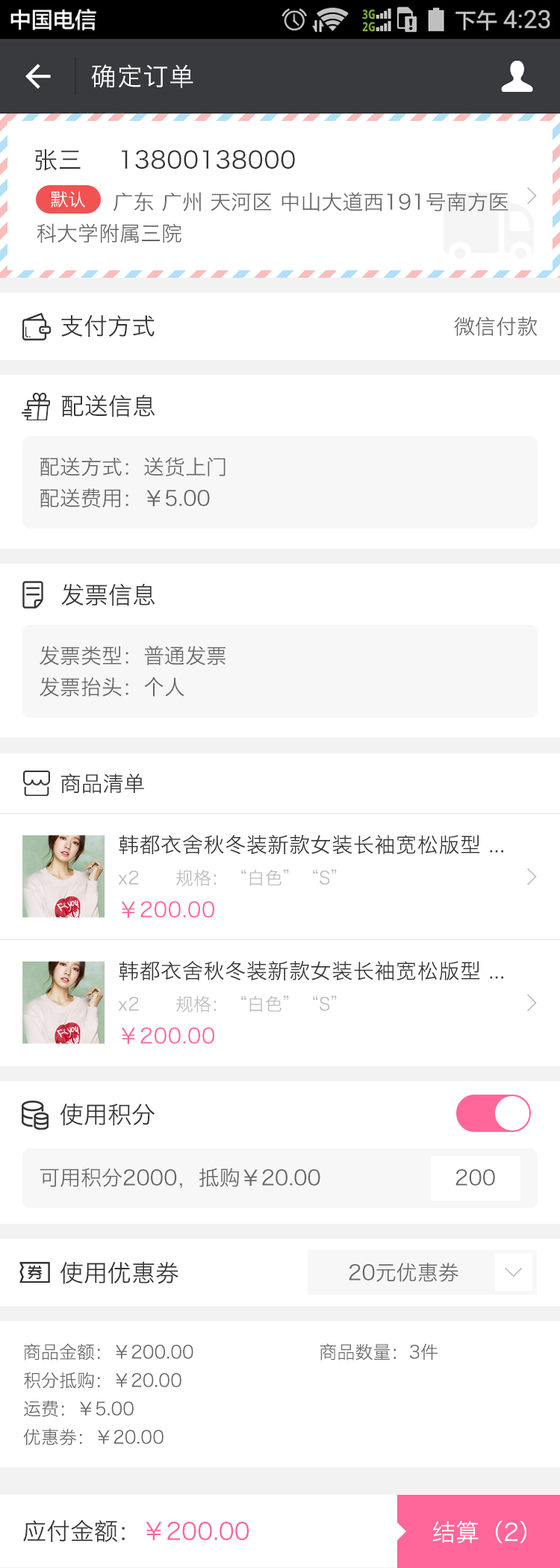
<style>
.page{position:relative;width:560px;height:1568px;background:#ffffff}
.page>*{position:absolute;margin:0}
.t1{font:25.4px "HiraginoSansGB-W3";letter-spacing:0.022em;color:#ffffff}
.t2{font:23.9px "HiraginoSansGB-W3";letter-spacing:0.022em;color:#333333}
.t3{font:20.9px/29.9px "HiraginoSansGB-W3";color:#666666}
.t4{font:17.9px "HiraginoSansGB-W3";color:#ffffff}
.t5{font:23.9px "SimSun";color:#bbbbbb;font-weight:bold}
.t6{font:23.9px "HiraginoSansGB-W3";color:#333333}
.t7{font:20.9px "HiraginoSansGB-W3";color:#666666}
.t8{font:21.3px "HiraginoSansGB-W3";color:#333333}
.t9{font:20.9px "HiraginoSansGB-W3";letter-spacing:0.022em;color:#333333}
.t10{font:17.9px "HiraginoSansGB-W3";color:#bbbbbb}
.t11{font:20.9px "HiraginoSansGB-W3";letter-spacing:0.022em;color:#ff6699}
.t12{font:17.9px/26.9px "HiraginoSansGB-W3";color:#666666}
.t13{font:23.9px "HiraginoSansGB-W3";color:#ff6699}
.t14{font:23.9px "HiraginoSansGB-W3";color:#ffffff}
</style>
<div class="page">
<p class="t1" style="left:91px;top:64px;width:102px;height:24px">确定订单</p>
<p class="t2" style="left:35px;top:149px;width:46px;height:22px">张三</p>
<p class="t2" style="left:122px;top:150px;width:173px;height:19px">13800138000</p>
<p class="t3" style="left:37px;top:192px;width:471px;height:51px">广东 广州 天河区 中山大道西191号南方医<br>科大学附属三院</p>
<p class="t4" style="left:51px;top:191px;width:34px;height:17px">默认</p>
<p class="t5" style="left:527px;top:187px;width:10px;height:18px">&gt;</p>
<p class="t6" style="left:61px;top:315px;width:94px;height:22px">支付方式</p>
<p class="t7" style="left:454px;top:317px;width:84px;height:19px">微信付款</p>
<p class="t6" style="left:62px;top:394px;width:93px;height:23px">配送信息</p>
<p class="t3" style="left:40px;top:457px;width:185px;height:51px">配送方式：送货上门<br>配送费用：￥5.00</p>
<p class="t6" style="left:61px;top:583px;width:94px;height:23px">发票信息</p>
<p class="t3" style="left:40px;top:646px;width:185px;height:51px">发票类型：普通发票<br>发票抬头：个人</p>
<p class="t8" style="left:61px;top:774px;width:83px;height:20px">商品清单</p>
<p class="t9" style="left:119px;top:834px;width:384px;height:20px">韩都衣舍秋冬装新款女装长袖宽松版型 ...</p>
<p class="t10" style="left:118px;top:869px;width:219px;height:17px">x2      规格：“白色”“S”</p>
<p class="t5" style="left:527px;top:868px;width:10px;height:18px">&gt;</p>
<p class="t11" style="left:121px;top:901px;width:93px;height:17px">￥200.00</p>
<p class="t9" style="left:119px;top:960px;width:384px;height:20px">韩都衣舍秋冬装新款女装长袖宽松版型 ...</p>
<p class="t10" style="left:118px;top:995px;width:219px;height:17px">x2      规格：“白色”“S”</p>
<p class="t5" style="left:527px;top:994px;width:10px;height:18px">&gt;</p>
<p class="t11" style="left:121px;top:1027px;width:93px;height:17px">￥200.00</p>
<p class="t6" style="left:60px;top:1104px;width:95px;height:22px">使用积分</p>
<p class="t7" style="left:40px;top:1168px;width:280px;height:20px">可用积分2000，抵购￥20.00</p>
<p class="t7" style="left:455px;top:1169px;width:40px;height:17px">200</p>
<p class="t6" style="left:60px;top:1261px;width:118px;height:23px">使用优惠券</p>
<p class="t7" style="left:349px;top:1263px;width:109px;height:19px">20元优惠券</p>
<p class="t5" style="left:505px;top:1267px;width:17px;height:11px;rotate:90deg">&gt;</p>
<p class="t12" style="left:23px;top:1343px;width:415px;height:103px">商品金额：￥200.00                     商品数量：3件<br>积分抵购：￥20.00<br>运费：￥5.00<br>优惠券：￥20.00</p>
<p class="t13" style="left:23px;top:1519px;width:226px;height:24px"><span class="t6">应付金额：</span>￥200.00</p>
<p class="t14" style="left:432px;top:1520px;width:94px;height:23px">结算（2）</p>
</div>
